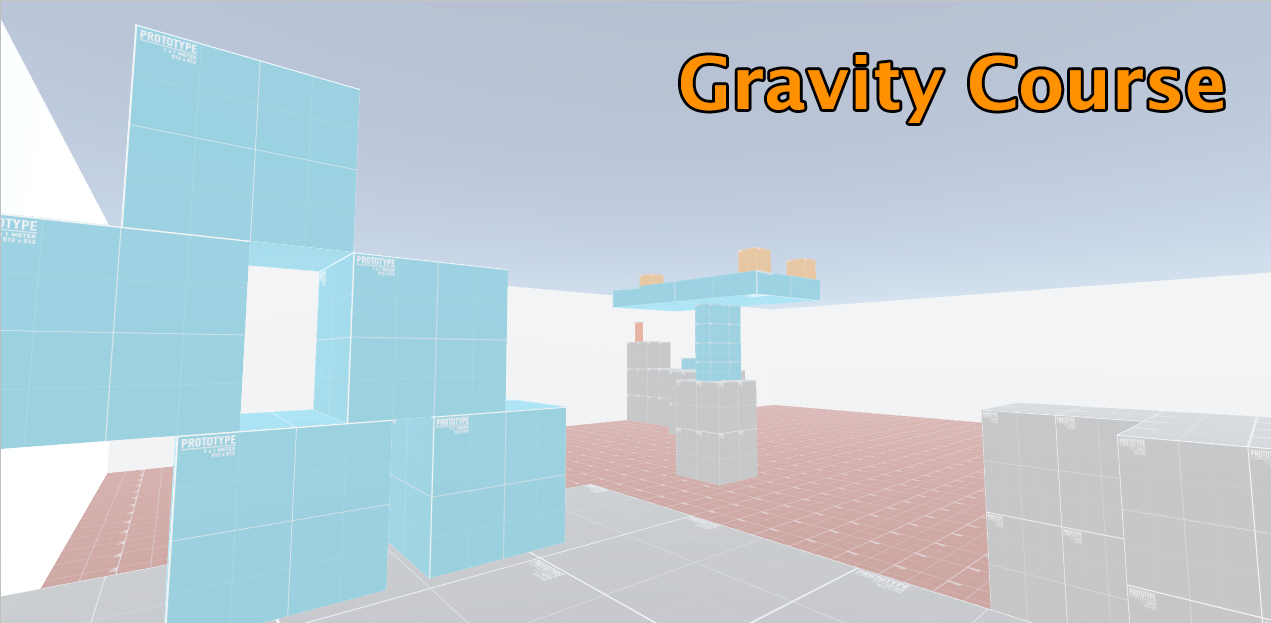
<style>
.page{position:relative;width:1271px;height:623px}
.page>*{position:absolute;margin:0}
.t1{font:72px "LucidaSans-Demi";color:#ff9000}
</style>
<div class="page">
<p class="t1" style="left:681px;top:55px;width:542px;height:68px">Gravity Course</p>
</div>
